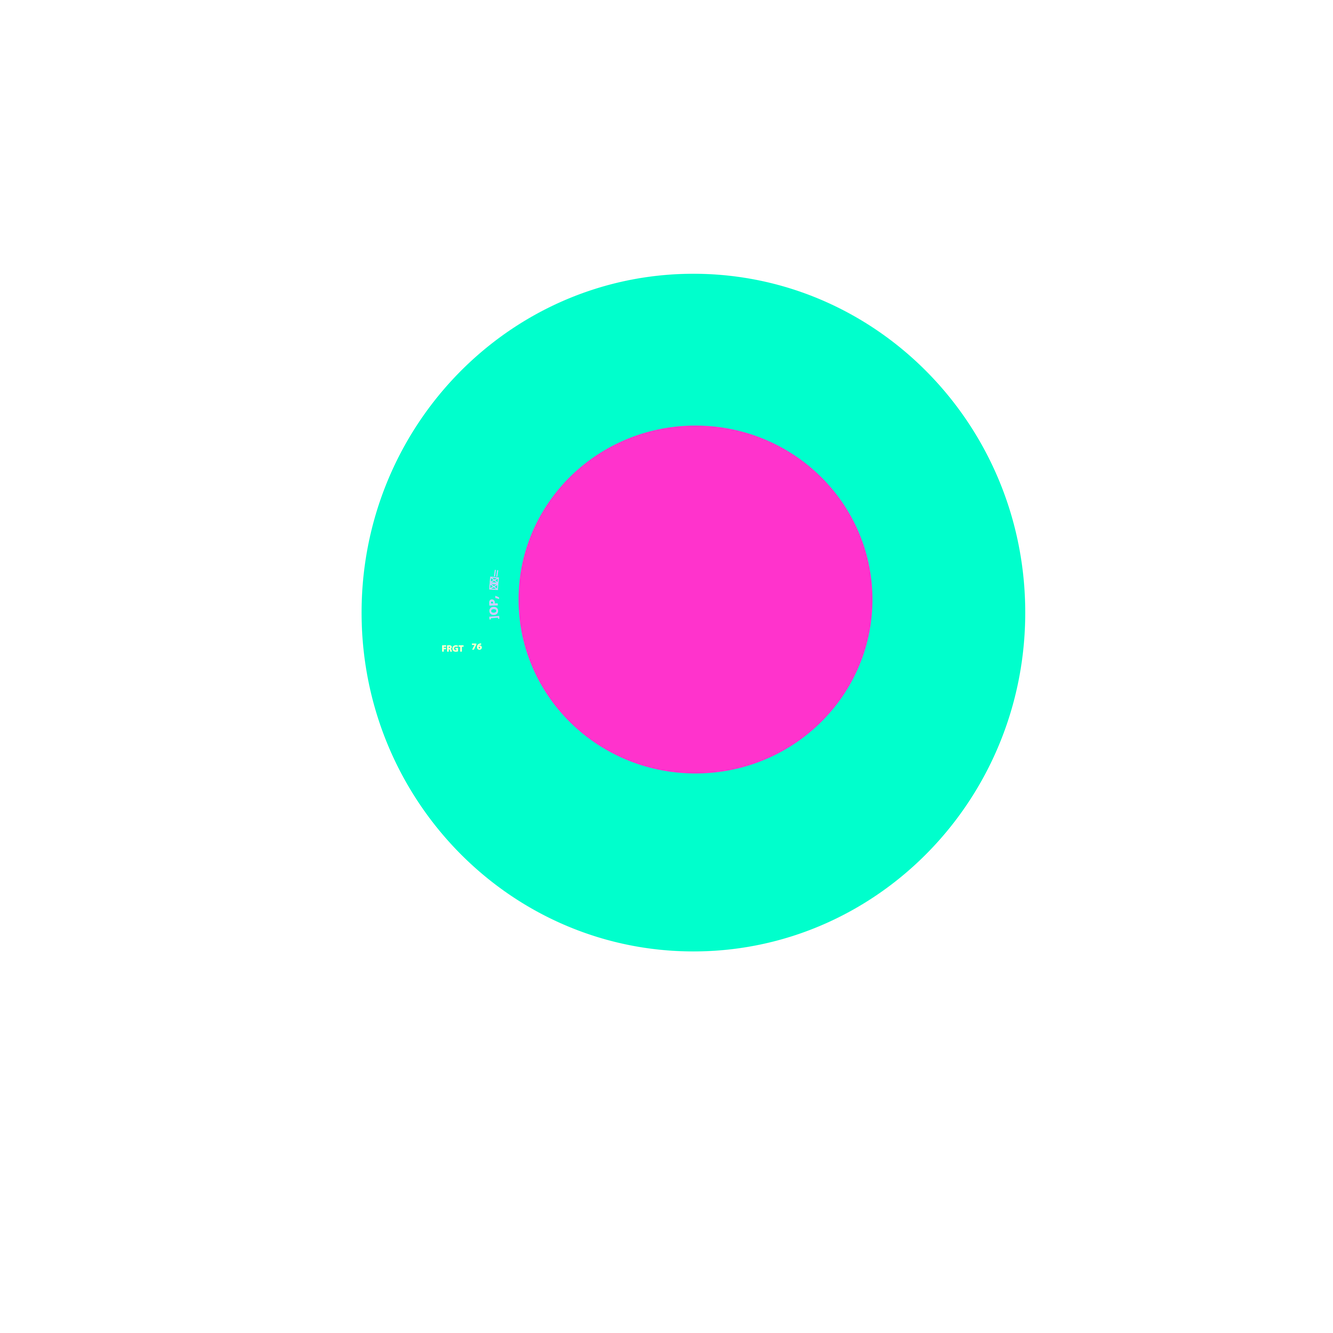
<style>
.page{position:relative;width:1333px;height:1333px;background:#ffffff}
.page>*{position:absolute;margin:0}
.t1{font:12px "MyriadPro-Bold";color:#ccccff;text-transform:uppercase;font-weight:bold}
.t2{font:12px "MyriadPro-Regular";color:#ccccff;text-transform:uppercase;font-weight:bold}
.t3{font:9px "MyriadPro-Bold";color:#ffffcc;text-transform:uppercase;font-weight:bold}
</style>
<div class="page">
<p class="t1" style="left:489px;top:570px;width:11px;height:50px">]op,  <span class="t2">ṁṃ̇=<br></span>\o;l</p>
<p class="t3" style="left:442px;top:645px;width:22px;height:7px">frgt</p>
<p class="t3" style="left:472px;top:644px;width:10px;height:6px">76</p>
</div>
